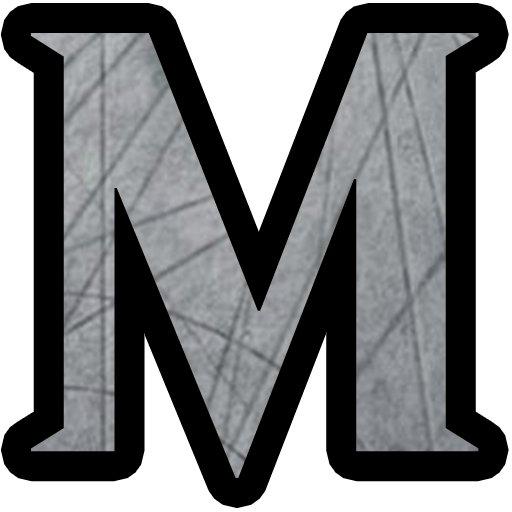
<style>
.page{position:relative;width:512px;height:512px;background:#000000}
.page>*{position:absolute;margin:0}
.t1{font:597.1px "Beleren-Bold";color:#94979a}
</style>
<div class="page">
<p class="t1" style="left:31px;top:33px;width:448px;height:445px">M</p>
</div>
